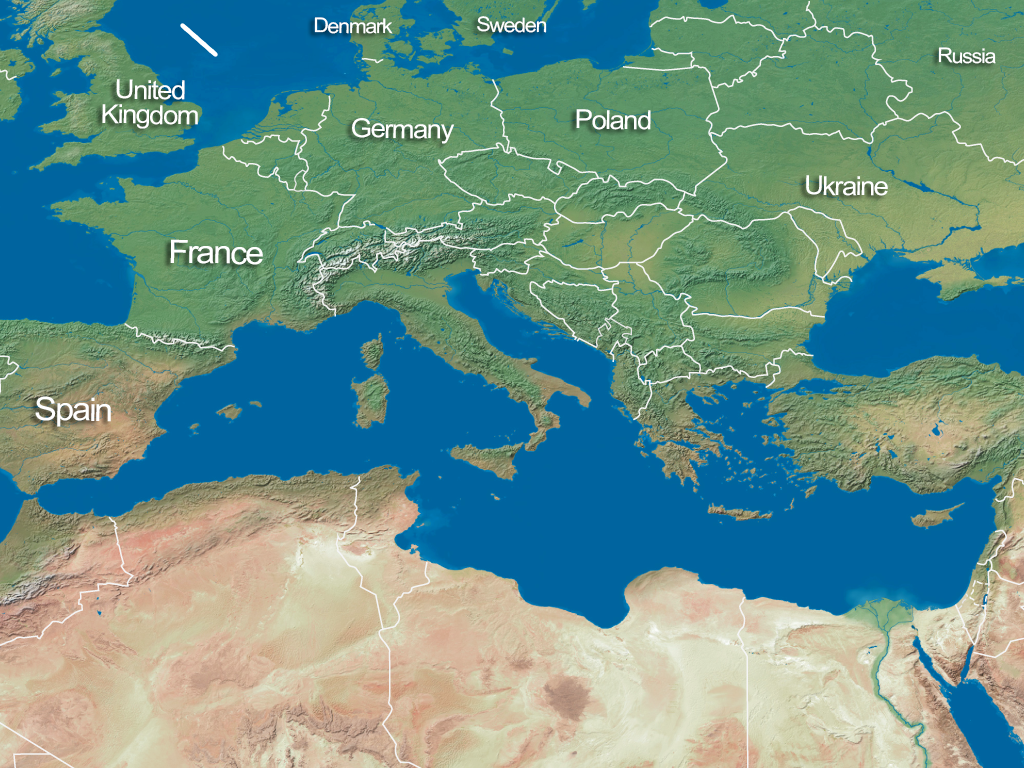
<style>
.page{position:relative;width:1024px;height:768px}
.page>*{position:absolute;margin:0}
.t1{font:20.4px "ArialMT";letter-spacing:-0.06em;color:#ffffff;scale:1.05 1}
.t2{font:26.2px/24.7px "ArialMT";letter-spacing:-0.06em;color:#ffffff;scale:1.05 1}
.t3{font:26.2px "ArialMT";letter-spacing:-0.06em;color:#ffffff;scale:1.05 1}
.t4{font:32.5px "ArialMT";letter-spacing:-0.06em;color:#ffffff;scale:1.05 1}
</style>
<div class="page">
<p class="t1" style="left:314px;top:17px;width:79px;height:17px;rotate:1deg">Denmark</p>
<p class="t1" style="left:477px;top:16px;width:70px;height:17px;rotate:1deg">Sweden</p>
<p class="t1" style="left:938px;top:47px;width:58px;height:17px;rotate:1deg">Russia</p>
<p class="t2" style="left:102px;top:79px;width:96px;height:50px;text-align:center;rotate:1deg">United<br>Kingdom</p>
<p class="t3" style="left:576px;top:109px;width:75px;height:21px;rotate:1deg">Poland</p>
<p class="t3" style="left:352px;top:118px;width:103px;height:26px;rotate:1deg">Germany</p>
<p class="t3" style="left:806px;top:175px;width:82px;height:21px;rotate:1deg">Ukraine</p>
<p class="t4" style="left:170px;top:239px;width:93px;height:26px;rotate:1deg">France</p>
<p class="t4" style="left:35px;top:396px;width:76px;height:31px;rotate:1deg">Spain</p>
</div>
